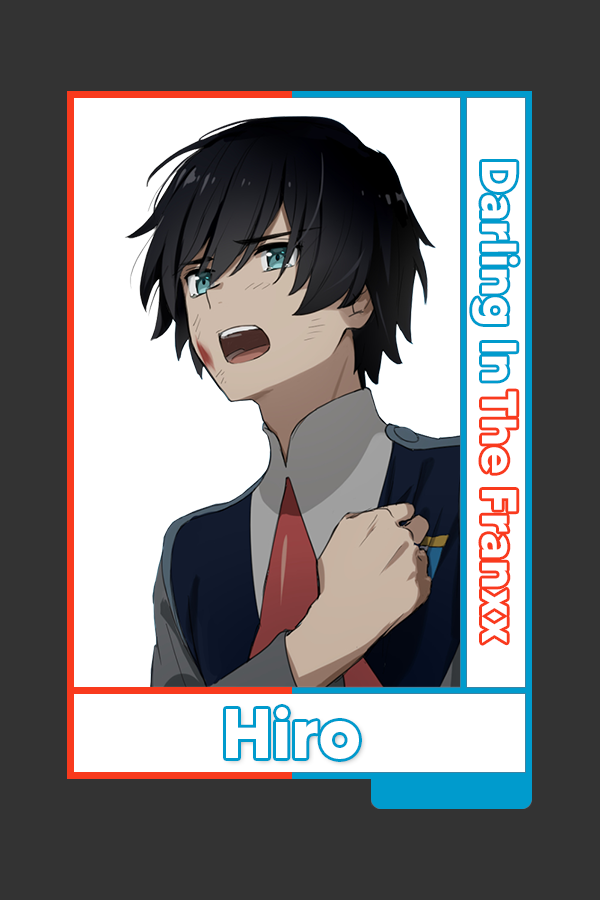
<style>
.page{position:relative;width:600px;height:900px;background:#333333}
.page>*{position:absolute;margin:0}
.t1{font:48.8px "MADETOMMY-Bold";color:#ffffff}
.t2{font:70.1px "MADETOMMY-Bold";color:#ffffff}
</style>
<div class="page">
<p class="t1" style="left:472px;top:162px;width:46px;height:219px;rotate:90deg">Darling In</p>
<p class="t1" style="left:481px;top:391px;width:36px;height:252px;rotate:90deg">The Franxx</p>
<p class="t2" style="left:226px;top:707px;width:133px;height:52px">Hiro</p>
</div>
